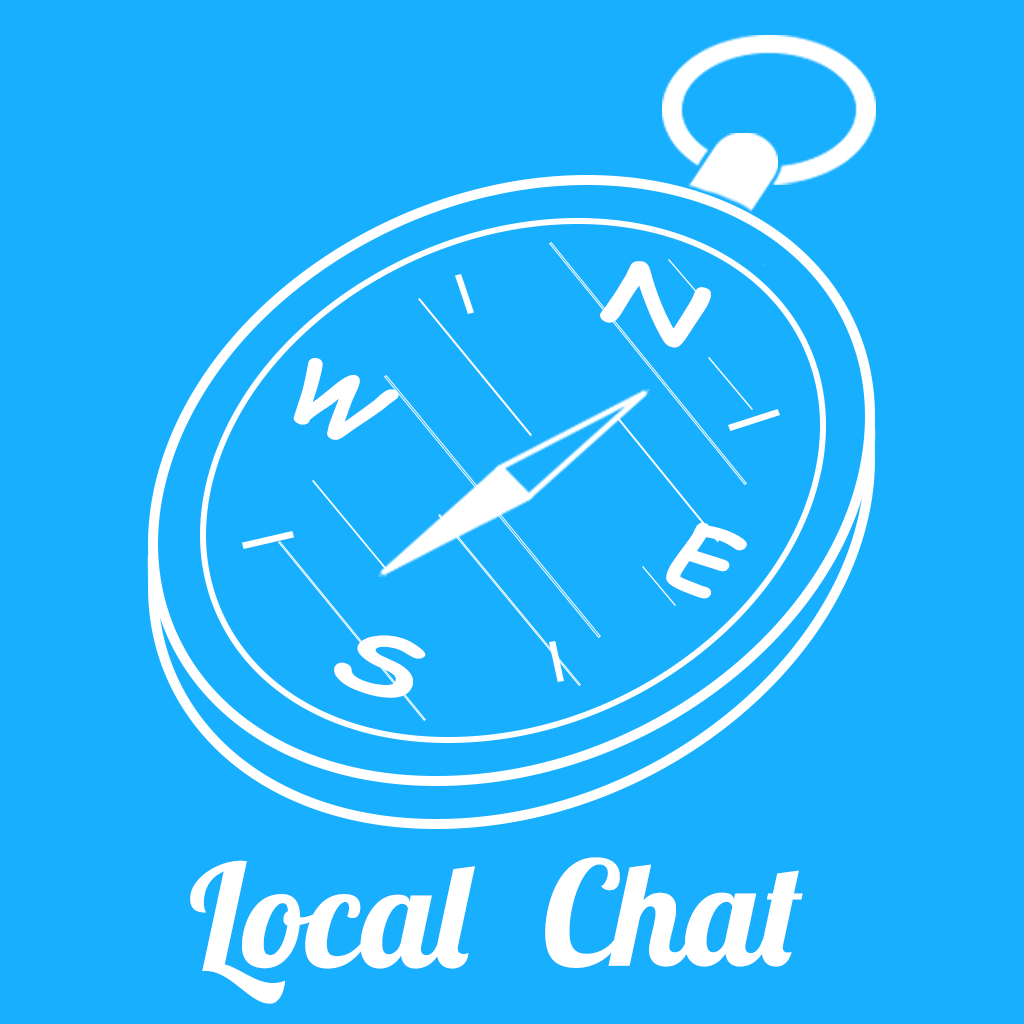
<style>
.page{position:relative;width:1024px;height:1024px;background:#19afff}
.page>*{position:absolute;margin:0}
.t1{font:88.8px "ComicSansMS-Bold";color:#ffffff;scale:1.34 1}
.t2{font:88.5px "ComicSansMS-Bold";color:#ffffff;scale:1.09 1}
.t3{font:144px "Lobster1.4";color:#ffffff}
</style>
<div class="page">
<p class="t1" style="left:600px;top:261px;width:111px;height:87px;rotate:22deg">N</p>
<p class="t2" style="left:293px;top:358px;width:106px;height:82px;rotate:22deg">W</p>
<p class="t2" style="left:666px;top:522px;width:81px;height:77px;rotate:22deg">E</p>
<p class="t1" style="left:334px;top:635px;width:92px;height:63px;rotate:22deg">S</p>
<p class="t3" style="left:545px;top:857px;width:258px;height:111px">Chat</p>
<p class="t3" style="left:190px;top:860px;width:285px;height:144px">Local</p>
</div>
